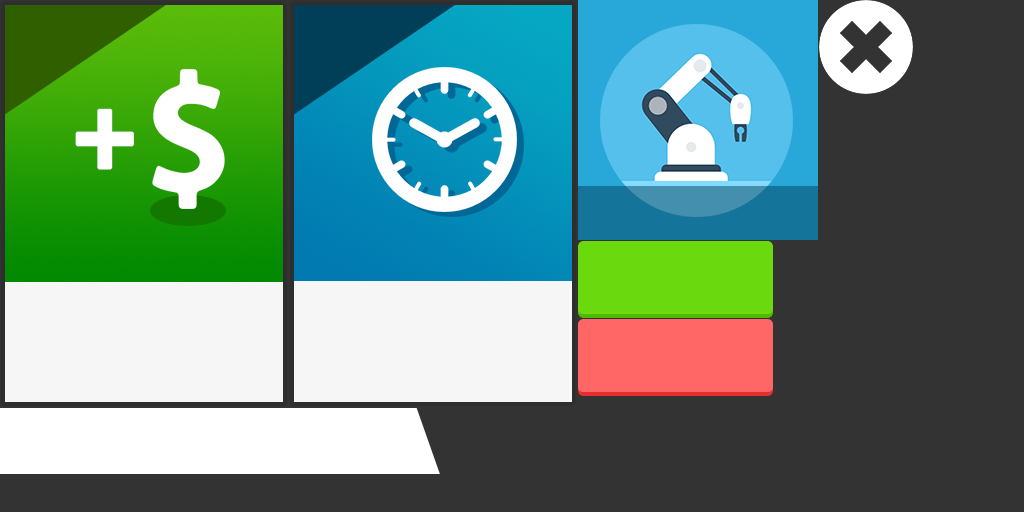
<style>
.page{position:relative;width:1024px;height:512px;background:#333333}
.page>*{position:absolute;margin:0}
.t1{font:106.7px "SFUIDisplay-Semibold";letter-spacing:0.03em;color:#ffffff;font-weight:bold}
</style>
<div class="page">
<p class="t1" style="left:75px;top:108px;width:59px;height:62px">+</p>
</div>
